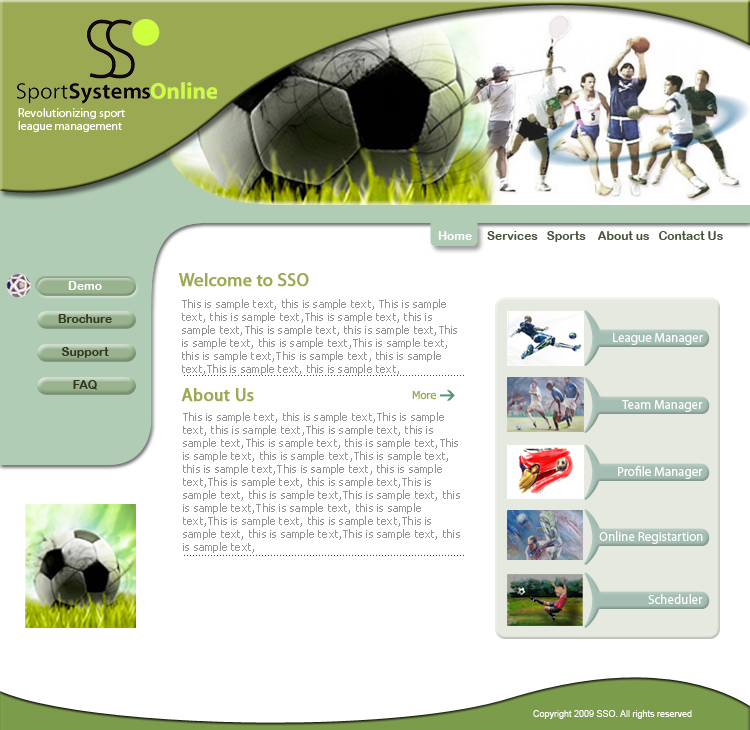
<style>
.page{position:relative;width:750px;height:730px;background:#ffffff}
.page>*{position:absolute;margin:0}
.t1{font:12px/6px "MyriadPro-Regular";color:#ffffff}
.t2{font:12px "ArialRoundedMTBold";color:#48533c}
.t3{font:12px "ArialRoundedMTBold";color:#ffffff}
.t4{font:12px/25px "ArialRoundedMTBold";color:#303623}
.t5{font:12px/25px "ArialRoundedMTBold";color:#ffffff}
.t6{font:18px "MyriadPro-Regular";color:#9baa52;font-weight:bold}
.t7{font:11px/13px "Tahoma";letter-spacing:0.02em;color:#868787}
.t8{font:13px "MyriadPro-Regular";color:#ffffff}
.t9{font:11px "Tahoma";color:#9baa52}
.t10{font:9px "ArialMT";color:#ffffff}
</style>
<div class="page">
<p class="t1" style="left:18px;top:108px;width:107px;height:24px">Revolutionizing sport<br>league management</p>
<p class="t2" style="left:438px;top:231px;width:285px;height:11px"><span class="t3">Home     </span>Services   Sports    About us   Contact Us</p>
<p class="t4" style="left:58px;top:281px;width:54px;height:109px;text-align:center"><span class="t5">Demo<br></span>Brochure<br>Support<br>FAQ</p>
<p class="t6" style="left:179px;top:273px;width:130px;height:14px">Welcome to SSO</p>
<p class="t7" style="left:182px;top:299px;width:275px;height:76px;opacity:0.9">This is sample text, this is sample text, This is sample text, this is sample text,This is sample text, this is sample text,This is sample text, this is sample text,This is sample text, this is sample text,This is sample text, this is sample text,This is sample text, this is sample text,This is sample text, this is sample text,</p>
<p class="t8" style="left:613px;top:333px;width:90px;height:12px">League Manager</p>
<p class="t6" style="left:181px;top:388px;width:73px;height:14px">About Us</p>
<p class="t9" style="left:412px;top:391px;width:24px;height:9px">More</p>
<p class="t8" style="left:622px;top:400px;width:81px;height:12px">Team Manager</p>
<p class="t7" style="left:183px;top:412px;width:277px;height:141px;opacity:0.9">This is sample text, this is sample text,This is sample text, this is sample text,This is sample text, this is sample text,This is sample text, this is sample text,This is sample text, this is sample text,This is sample text, this is sample text,This is sample text, this is sample text,This is sample text, this is sample text,This is sample text, this is sample text,This is sample text, this is sample text,This is sample text, this is sample text,This is sample text, this is sample text,This is sample text, this is sample text,This is sample text, this is sample text,</p>
<p class="t8" style="left:618px;top:466px;width:85px;height:13px">Profile Manager</p>
<p class="t8" style="left:599px;top:531px;width:104px;height:13px">Online Registartion</p>
<p class="t8" style="left:648px;top:594px;width:55px;height:10px">Scheduler</p>
<p class="t10" style="left:533px;top:710px;width:159px;height:9px">Copyright 2009 SSO. All rights reserved</p>
</div>
